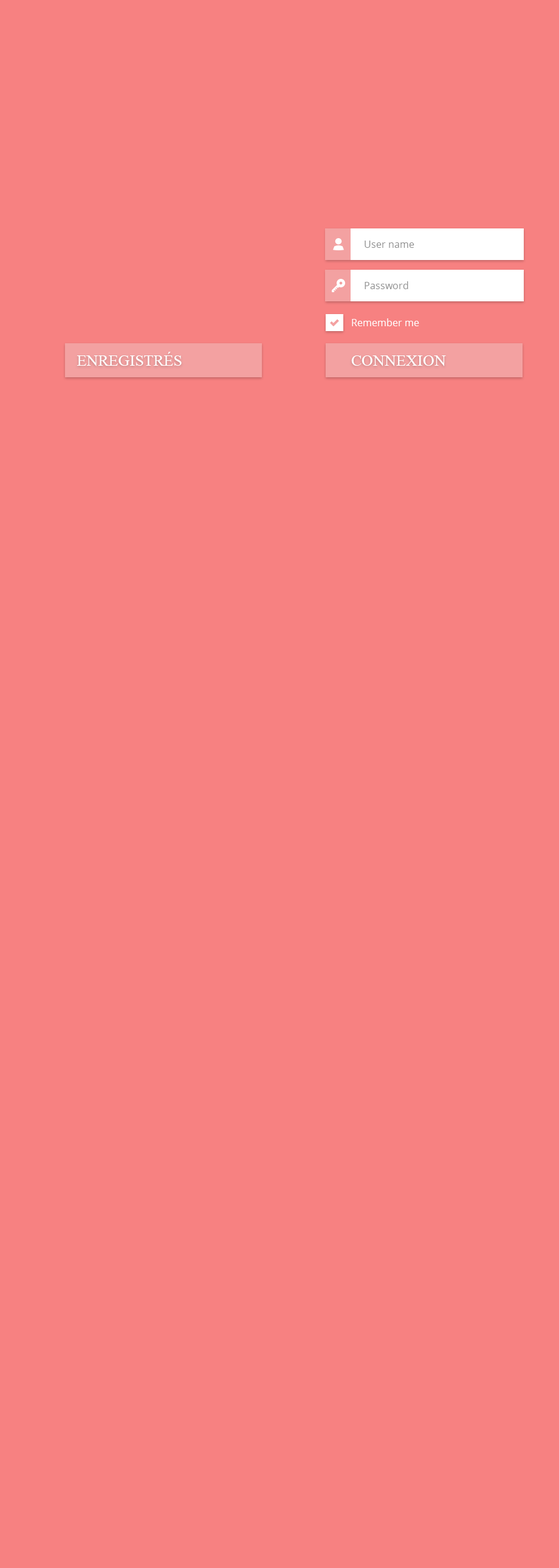
<style>
.page{position:relative;width:559px;height:1568px;background:#f78181}
.page>*{position:absolute;margin:0}
.t1{font:9.7px "OpenSans";color:#909090}
.t2{font:9.7px "OpenSans";color:#ffffff}
.t3{font:15.8px "MyriadPro-Regular";color:#ffffff;text-transform:uppercase}
</style>
<div class="page">
<p class="t1" style="left:365px;top:241px;width:49px;height:7px">User name</p>
<p class="t1" style="left:365px;top:281px;width:43px;height:8px">Password</p>
<p class="t2" style="left:352px;top:318px;width:67px;height:8px">Remember me</p>
<p class="t3" style="left:77px;top:352px;width:105px;height:14px">enregistrés</p>
<p class="t3" style="left:351px;top:355px;width:95px;height:11px">COnnexion</p>
</div>
